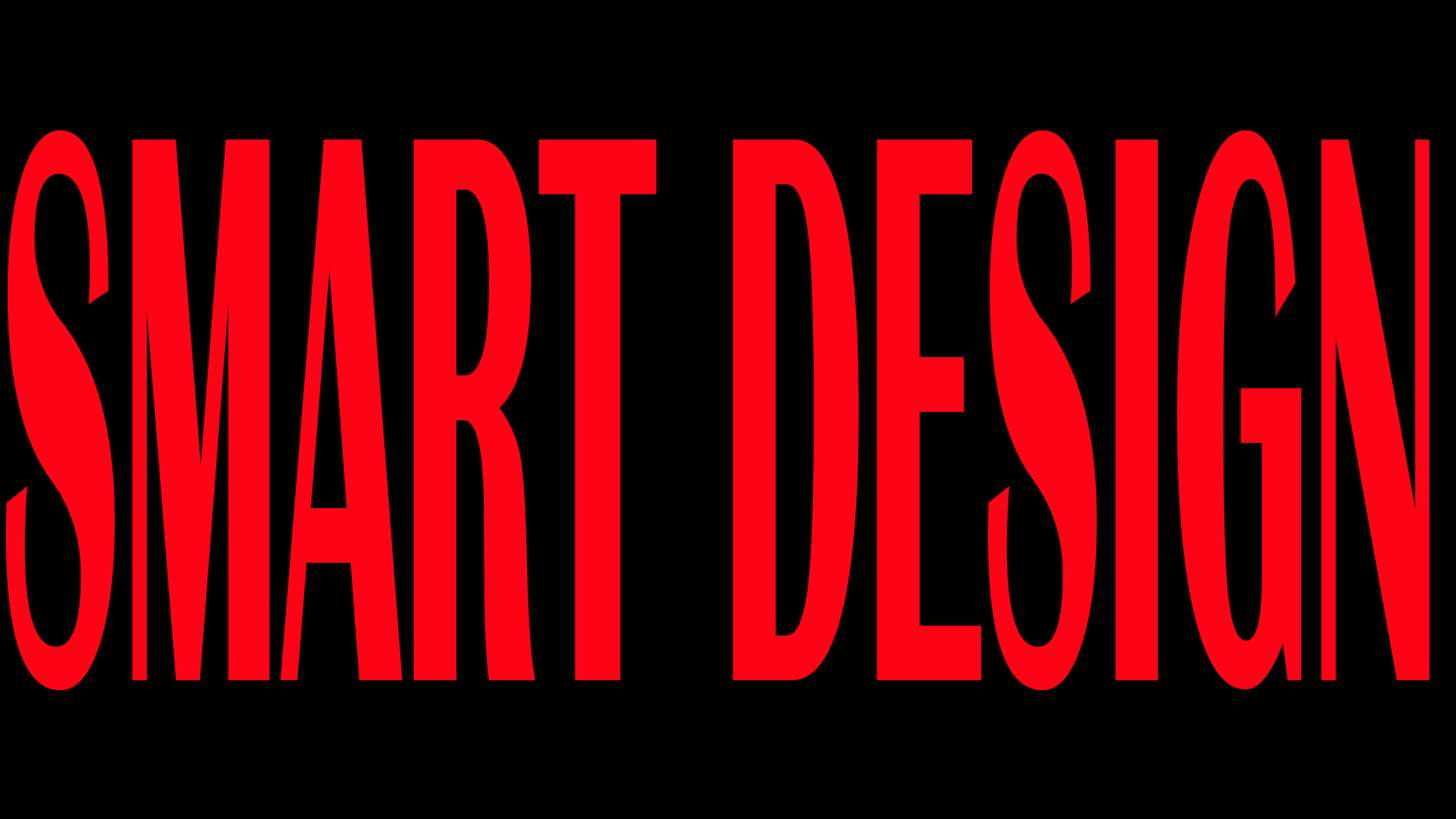
<style>
.page{position:relative;width:1456px;height:819px;background:#000000}
.page>*{position:absolute;margin:0}
.t1{font:811.5px "BritannicBold";color:#fe0315;scale:0.27 1}
</style>
<div class="page">
<p class="t1" style="left:5px;top:130px;width:1424px;height:560px">SMART DESIGN</p>
</div>
